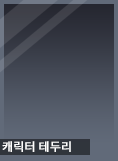
<style>
.page{position:relative;width:118px;height:161px}
.page>*{position:absolute;margin:0}
.t1{font:12px "NotoSansCJKkr-Regular";letter-spacing:-0.01em;color:#ffffff;font-weight:bold}
</style>
<div class="page">
<p class="t1" style="left:2px;top:141px;width:69px;height:11px">캐릭터 테두리</p>
</div>
